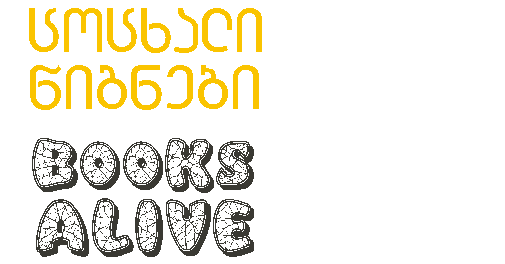
<style>
.page{position:relative;width:505px;height:264px;background:#ffffff}
.page>*{position:absolute;margin:0}
.t1{font:66.7px "BabukaMtavruli";color:#fac400}
.t2{font:66.7px "BabukaMtavruli";color:#fac400;scale:1.03 1}
.t3{font:66.7px "EggshellMosaic-Regular";color:#3a3933}
.t4{font:70.4px "EggshellMosaic-Regular";color:#3a3933}
</style>
<div class="page">
<p class="t1" style="left:29px;top:8px;width:233px;height:45px">cocxali</p>
<p class="t2" style="left:30px;top:65px;width:229px;height:45px">wignebi</p>
<p class="t3" style="left:32px;top:138px;width:222px;height:55px">Books</p>
<p class="t4" style="left:36px;top:198px;width:218px;height:59px">Alive</p>
</div>
